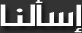
<style>
.page{position:relative;width:82px;height:33px;background:#333333}
.page>*{position:absolute;margin:0}
.t1{font:43.9px "MO_Nawel";letter-spacing:-0.08em;color:#ffffff;scale:1.69 1}
</style>
<div class="page">
<p class="t1" style="left:0px;top:0px;width:82px;height:33px">إ سأ لنا</p>
</div>
